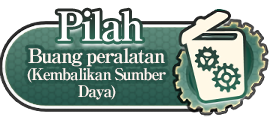
<style>
.page{position:relative;width:270px;height:117px;background:#ffffff}
.page>*{position:absolute;margin:0}
.t1{font:40px "RyuminPro-ExBold";letter-spacing:-0.08em;color:#ffffff}
.t2{font:16px/17px "RyuminPro-ExBold";letter-spacing:-0.08em;color:#fff6f1}
.t3{font:20px/17px "RyuminPro-ExBold";letter-spacing:-0.08em;color:#fff6f1}
</style>
<div class="page">
<p class="t1" style="left:57px;top:10px;width:86px;height:32px">Pilah</p>
<p class="t2" style="left:27px;top:48px;width:139px;height:52px;text-align:center"><span class="t3">Buang peralatan<br></span>(Kembalikan Sumber<br>Daya)</p>
</div>
